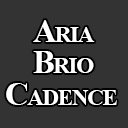
<style>
.page{position:relative;width:128px;height:128px;background:#333333}
.page>*{position:absolute;margin:0}
.t1{font:32.5px "TimesNewRomanPS-BoldMT";letter-spacing:-0.05em;color:#ffffff;font-variant:small-caps}
</style>
<div class="page">
<p class="t1" style="left:33px;top:20px;width:62px;height:22px">Aria</p>
<p class="t1" style="left:33px;top:51px;width:61px;height:22px">Brio</p>
<p class="t1" style="left:6px;top:83px;width:111px;height:22px">Cadence</p>
</div>
